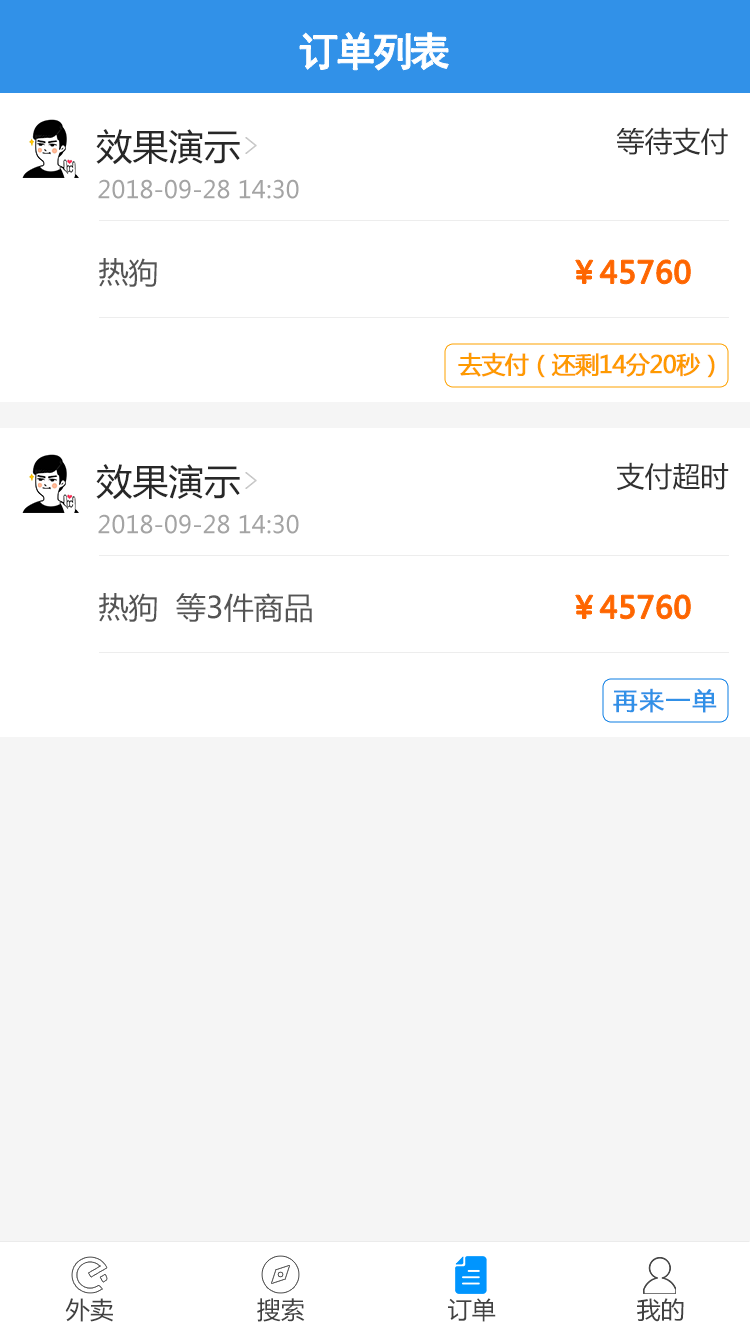
<style>
.page{position:relative;width:750px;height:1334px;background:#ffffff}
.page>*{position:absolute;margin:0}
.t1{font:40px "SimHei";letter-spacing:-0.1em;color:#ffffff;font-weight:bold}
.t2{font:36px "MicrosoftYaHei";color:#272727}
.t3{font:28px "MicrosoftYaHei";color:#313131}
.t4{font:24px "MicrosoftYaHei";color:#a4a4a4}
.t5{font:30px "MicrosoftYaHei";color:#545454}
.t6{font:30px "MicrosoftYaHei";color:#fe6500;font-weight:bold}
.t7{font:24px "MicrosoftYaHei";letter-spacing:-0.05em;color:#fe9a00;font-weight:bold}
.t8{font:24px "MicrosoftYaHei";letter-spacing:0.075em;color:#3190e7;font-weight:bold}
.t9{font:24px "MicrosoftYaHei";color:#414141}
</style>
<div class="page">
<p class="t1" style="left:300px;top:32px;width:149px;height:38px">订单列表</p>
<p class="t2" style="left:96px;top:129px;width:144px;height:36px">效果演示</p>
<p class="t3" style="left:616px;top:127px;width:112px;height:29px">等待支付</p>
<p class="t4" style="left:98px;top:179px;width:201px;height:20px">2018-09-28 14:30</p>
<p class="t5" style="left:99px;top:258px;width:58px;height:29px">热狗</p>
<p class="t6" style="left:575px;top:260px;width:116px;height:24px">￥45760</p>
<p class="t7" style="left:458px;top:352px;width:257px;height:26px">去支付（还剩14分20秒）</p>
<p class="t3" style="left:617px;top:462px;width:112px;height:29px">支付超时</p>
<p class="t2" style="left:96px;top:464px;width:144px;height:36px">效果演示</p>
<p class="t4" style="left:98px;top:514px;width:201px;height:20px">2018-09-28 14:30</p>
<p class="t5" style="left:99px;top:593px;width:213px;height:30px">热狗  等3件商品</p>
<p class="t6" style="left:575px;top:595px;width:116px;height:24px">￥45760</p>
<p class="t8" style="left:613px;top:688px;width:104px;height:25px">再来一单</p>
<p class="t9" style="left:65px;top:1298px;width:48px;height:24px">外卖</p>
<p class="t9" style="left:257px;top:1298px;width:48px;height:24px">搜索</p>
<p class="t9" style="left:448px;top:1298px;width:48px;height:24px">订单</p>
<p class="t9" style="left:637px;top:1298px;width:47px;height:24px">我的</p>
</div>
